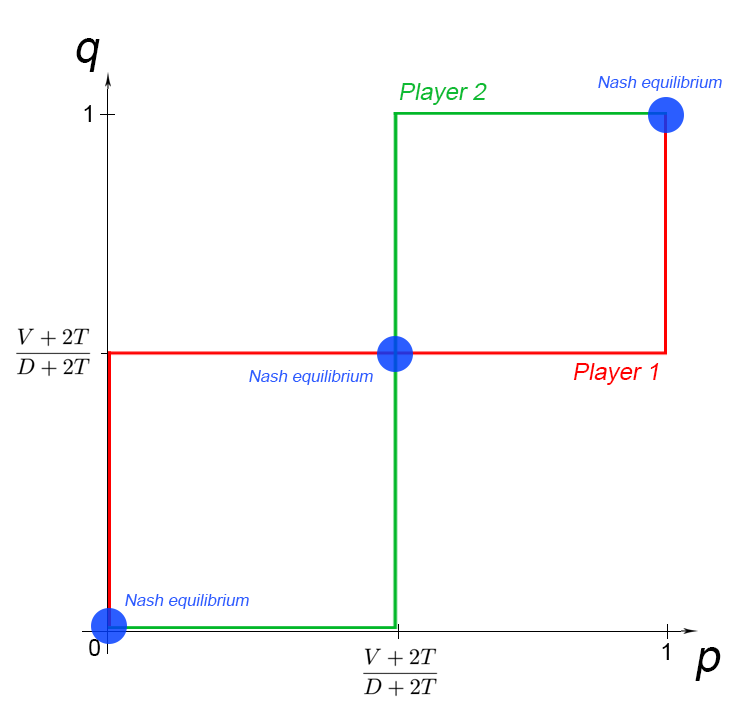
<style>
.page{position:relative;width:732px;height:712px;background:#ffffff}
.page>*{position:absolute;margin:0}
.t1{font:46.5px "ArialMT";color:#000000;font-style:italic}
.t2{font:16.7px "ArialMT";color:#2b5dff;font-style:italic}
.t3{font:23.9px "ArialMT";color:#0ebb33;font-style:italic}
.t4{font:23px "ArialMT";color:#000000}
.t5{font:23.9px "ArialMT";color:#ff0000;font-style:italic}
</style>
<div class="page">
<p class="t1" style="left:76px;top:38px;width:24px;height:34px">q</p>
<p class="t2" style="left:598px;top:76px;width:124px;height:15px">Nash equilibrium</p>
<p class="t3" style="left:399px;top:83px;width:88px;height:22px">Player 2</p>
<p class="t4" style="left:84px;top:105px;width:7px;height:17px">1</p>
<p class="t5" style="left:573px;top:363px;width:86px;height:22px">Player 1</p>
<p class="t2" style="left:249px;top:370px;width:124px;height:15px">Nash equilibrium</p>
<p class="t2" style="left:125px;top:594px;width:124px;height:15px">Nash equilibrium</p>
<p class="t4" style="left:89px;top:639px;width:11px;height:17px">0</p>
<p class="t4" style="left:662px;top:643px;width:7px;height:17px">1</p>
<p class="t1" style="left:695px;top:647px;width:26px;height:34px">p</p>
</div>
